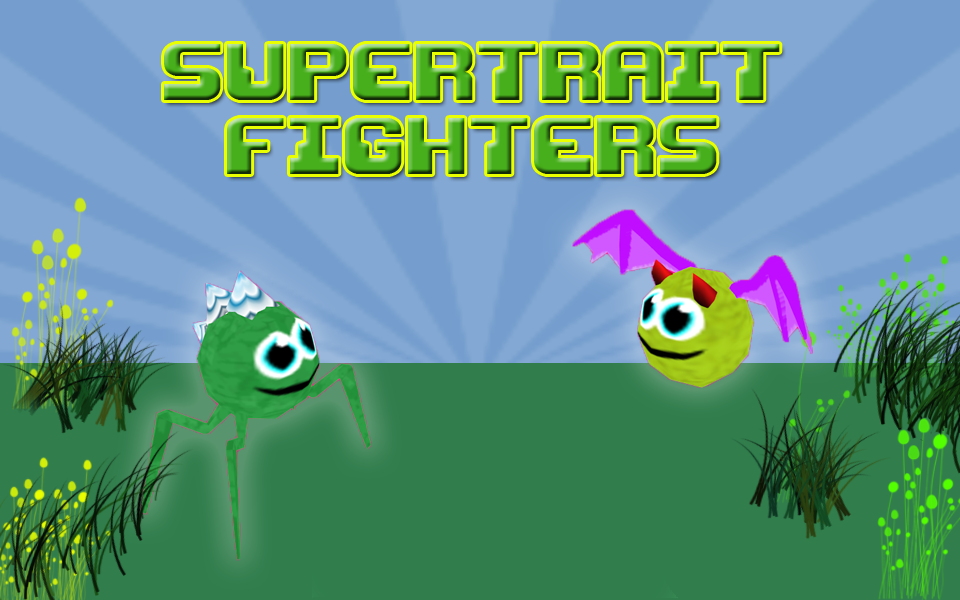
<style>
.page{position:relative;width:960px;height:600px;background:#317d4c}
.page>*{position:absolute;margin:0}
.t1{font:67px/74.4px "Razor1911";letter-spacing:-0.02em}
</style>
<div class="page">
<p class="t1" style="left:164px;top:44px;width:616px;height:130px;text-align:center">SuperTrait<br>Fighters</p>
</div>
